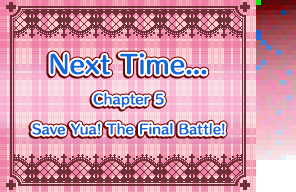
<style>
.page{position:relative;width:296px;height:192px}
.page>*{position:absolute;margin:0}
.t1{font:24px "HummingStd-B";letter-spacing:0.02em;color:#1068d8}
.t2{font:13px/30px "HummingStd-B";letter-spacing:0.02em;color:#1068d8}
</style>
<div class="page">
<p class="t1" style="left:50px;top:53px;width:157px;height:22px">Next Time...</p>
<p class="t2" style="left:32px;top:92px;width:193px;height:43px;text-align:center">Chapter 5<br>Save Yua! The Final Battle!</p>
</div>
